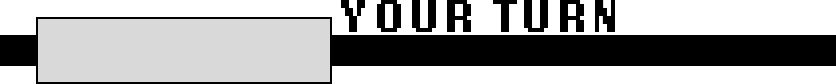
<style>
.page{position:relative;width:836px;height:84px;background:#ffffff}
.page>*{position:absolute;margin:0}
.t1{font:47.7px "LoRes12OT-Bold";letter-spacing:0.07em;color:#000000}
</style>
<div class="page">
<p class="t1" style="left:341px;top:0px;width:274px;height:32px">YOUR TURN</p>
</div>
